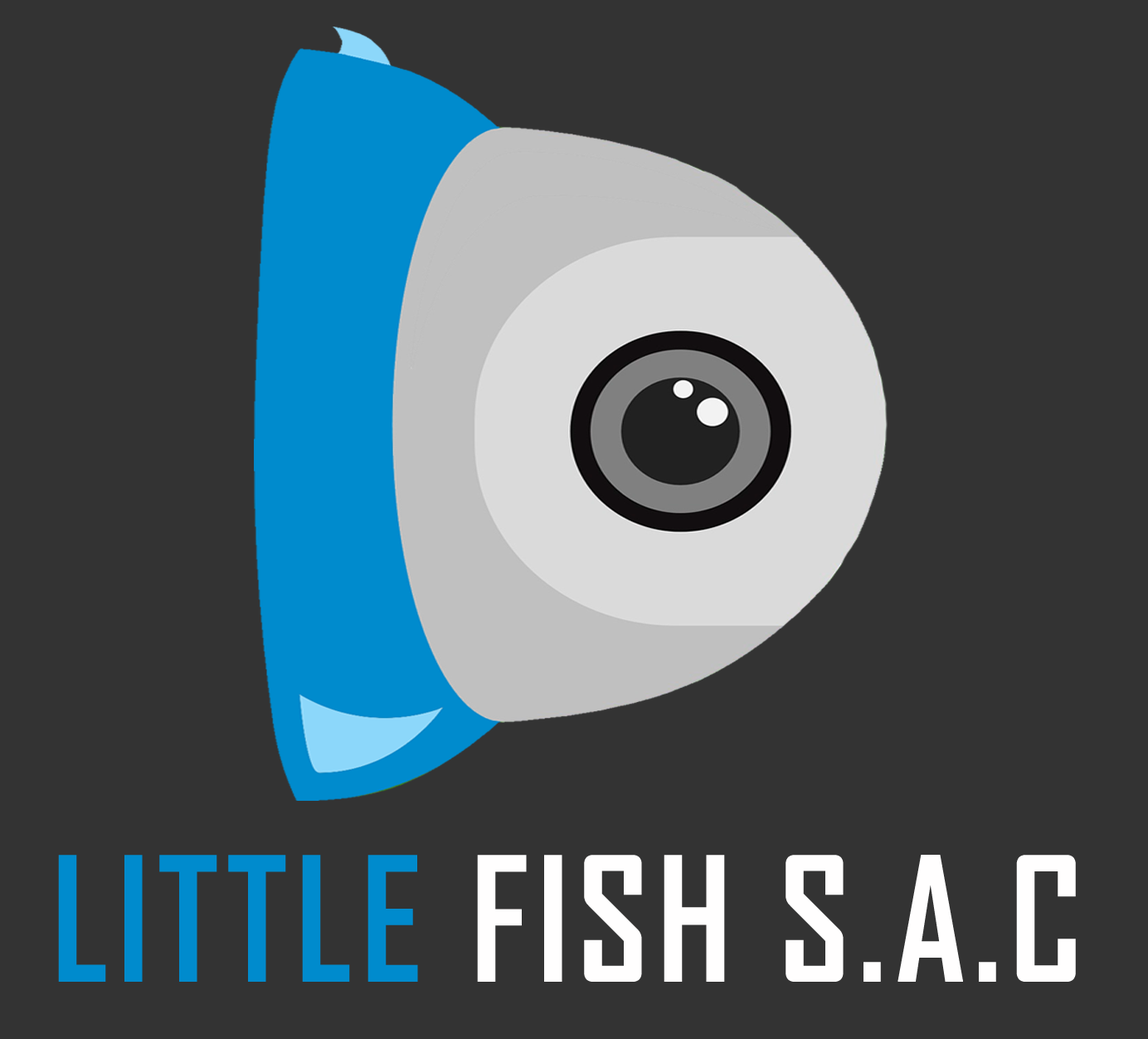
<style>
.page{position:relative;width:1148px;height:1039px;background:#333333}
.page>*{position:absolute;margin:0}
.t1{font:165.9px "AgencyFB-Bold";letter-spacing:0.05em;color:#fffefe;text-transform:uppercase;scale:0.94 1}
.t2{font:165.9px "AgencyFB-Bold";letter-spacing:0.05em;color:#008bcd;text-transform:uppercase;scale:0.94 1}
</style>
<div class="page">
<p class="t1" style="left:58px;top:854px;width:1018px;height:127px"><span class="t2">LITTLE </span>FISH S.A.C</p>
</div>
